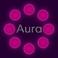
<style>
.page{position:relative;width:58px;height:58px;background:#260032}
.page>*{position:absolute;margin:0}
.t1{font:10.9px "Muli-Light";color:#737373;font-weight:bold}
</style>
<div class="page">
<p class="t1" style="left:16px;top:24px;width:26px;height:9px">Aura</p>
</div>
